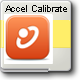
<style>
.page{position:relative;width:80px;height:80px}
.page>*{position:absolute;margin:0}
.t1{font:9px "ArialMT";color:#050505}
</style>
<div class="page">
<p class="t1" style="left:5px;top:5px;width:62px;height:7px">Accel Calibrate</p>
</div>
